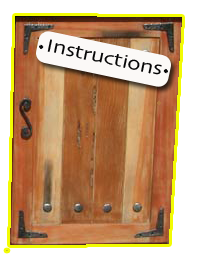
<style>
.page{position:relative;width:200px;height:260px;background:#ffffff}
.page>*{position:absolute;margin:0}
.t1{font:19px "Skia-Regular";letter-spacing:-0.02em;color:#050505;scale:1.22 1}
</style>
<div class="page">
<p class="t1" style="left:47px;top:39px;width:115px;height:36px;rotate:12deg">Instructions</p>
</div>
